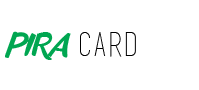
<style>
.page{position:relative;width:199px;height:90px;background:#ffffff}
.page>*{position:absolute;margin:0}
.t1{font:30px "anothershabby";color:#00a651}
.t2{font:30px "basictitlefont";color:#000000}
.t3{font:33px "basictitlefont";color:#000000}
</style>
<div class="page">
<p class="t1" style="left:5px;top:31px;width:66px;height:29px"><span class="t2"> </span>PIRA</p>
<p class="t3" style="left:80px;top:32px;width:56px;height:25px">card</p>
</div>
